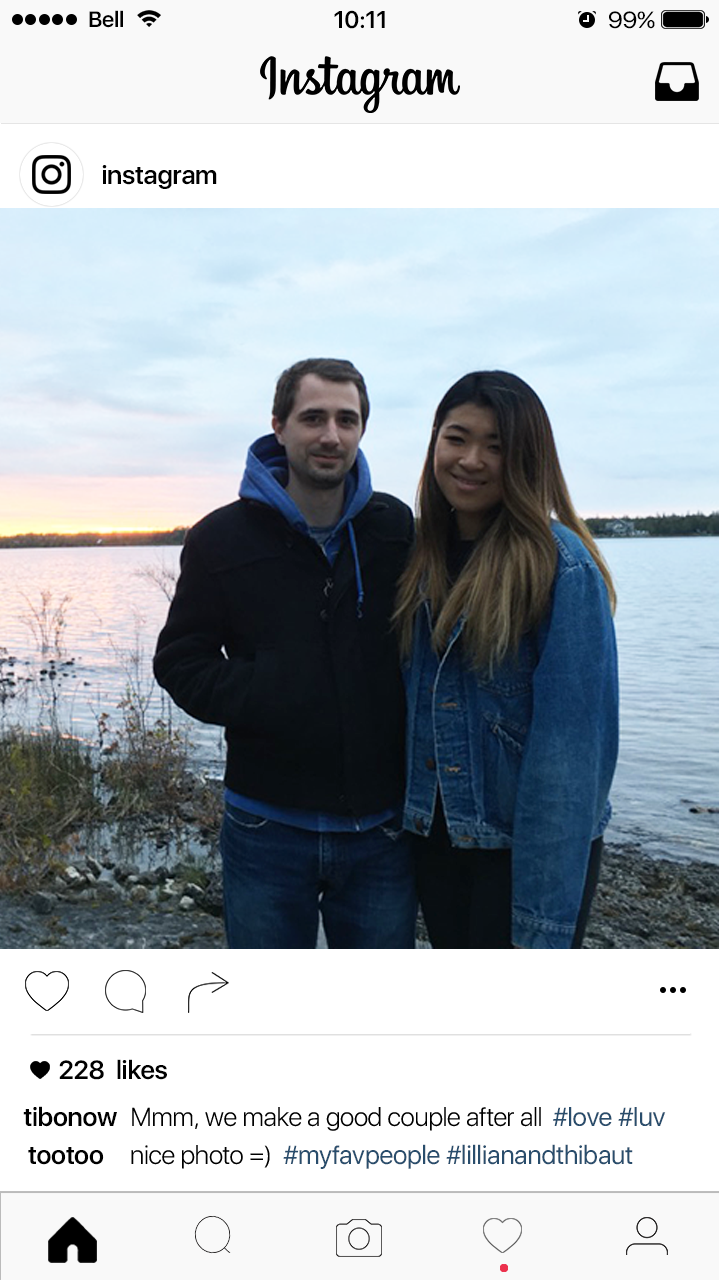
<style>
.page{position:relative;width:719px;height:1280px;background:#ffffff}
.page>*{position:absolute;margin:0}
.t1{font:22px "SFUIDisplay-Semibold";letter-spacing:-0.01em;color:#000000}
.t2{font:24px "SFUIDisplay-Semibold";letter-spacing:-0.01em;color:#000000}
.t3{font:23.2px "SFUIDisplay-Regular";letter-spacing:-0.01em;color:#000000;scale:1.07 1}
.t4{font:26px "SFUIDisplay-Semibold";letter-spacing:-0.01em;color:#000000}
.t5{font:26px "SFUIDisplay-Light";letter-spacing:-0.01em;color:#000000}
.t6{font:26px "SFUIDisplay-Regular";letter-spacing:-0.01em;color:#294d6c}
</style>
<div class="page">
<p class="t1" style="left:89px;top:10px;width:34px;height:18px">Bell</p>
<p class="t2" style="left:334px;top:10px;width:51px;height:19px">10:11</p>
<p class="t3" style="left:609px;top:11px;width:46px;height:18px">99%</p>
<p class="t4" style="left:102px;top:165px;width:115px;height:24px">instagram</p>
<p class="t4" style="left:59px;top:1059px;width:108px;height:21px">228  likes</p>
<p class="t4" style="left:23px;top:1106px;width:94px;height:21px">tibonow</p>
<p class="t5" style="left:132px;top:1107px;width:409px;height:24px">Mmm, we make a good couple after all</p>
<p class="t6" style="left:553px;top:1107px;width:113px;height:19px">#love #luv</p>
<p class="t5" style="left:131px;top:1145px;width:139px;height:24px">nice photo =)</p>
<p class="t6" style="left:283px;top:1144px;width:350px;height:25px">#myfavpeople #lillianandthibaut</p>
<p class="t4" style="left:28px;top:1147px;width:76px;height:18px">tootoo</p>
</div>
